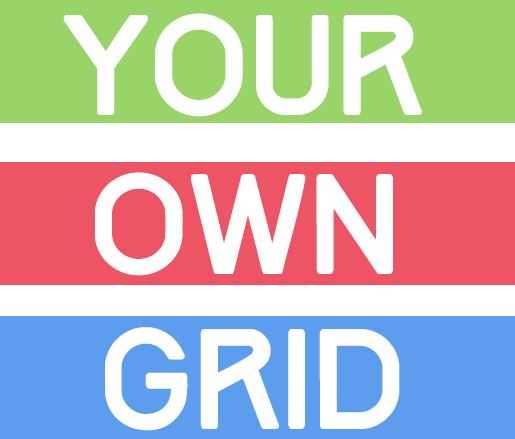
<style>
.page{position:relative;width:515px;height:439px;background:#ffffff}
.page>*{position:absolute;margin:0}
.t1{font:125px "Track";color:#ffffff}
</style>
<div class="page">
<p class="t1" style="left:63px;top:13px;width:359px;height:104px">YOUR</p>
<p class="t1" style="left:95px;top:172px;width:298px;height:104px">OWN</p>
<p class="t1" style="left:105px;top:327px;width:295px;height:104px">GRID</p>
</div>
